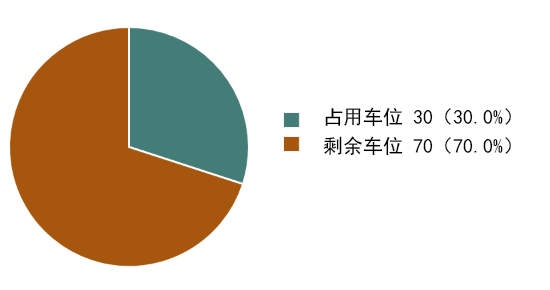
<style>
.page{position:relative;width:550px;height:290px;background:#ffffff}
.page>*{position:absolute;margin:0}
.t1{font:20px "SimHei";color:#000000}
</style>
<div class="page">
<p class="t1" style="left:325px;top:107px;width:186px;height:20px">占用车位 30（30.0%）</p>
<p class="t1" style="left:323px;top:136px;width:188px;height:20px">剩余车位 70（70.0%）</p>
</div>
